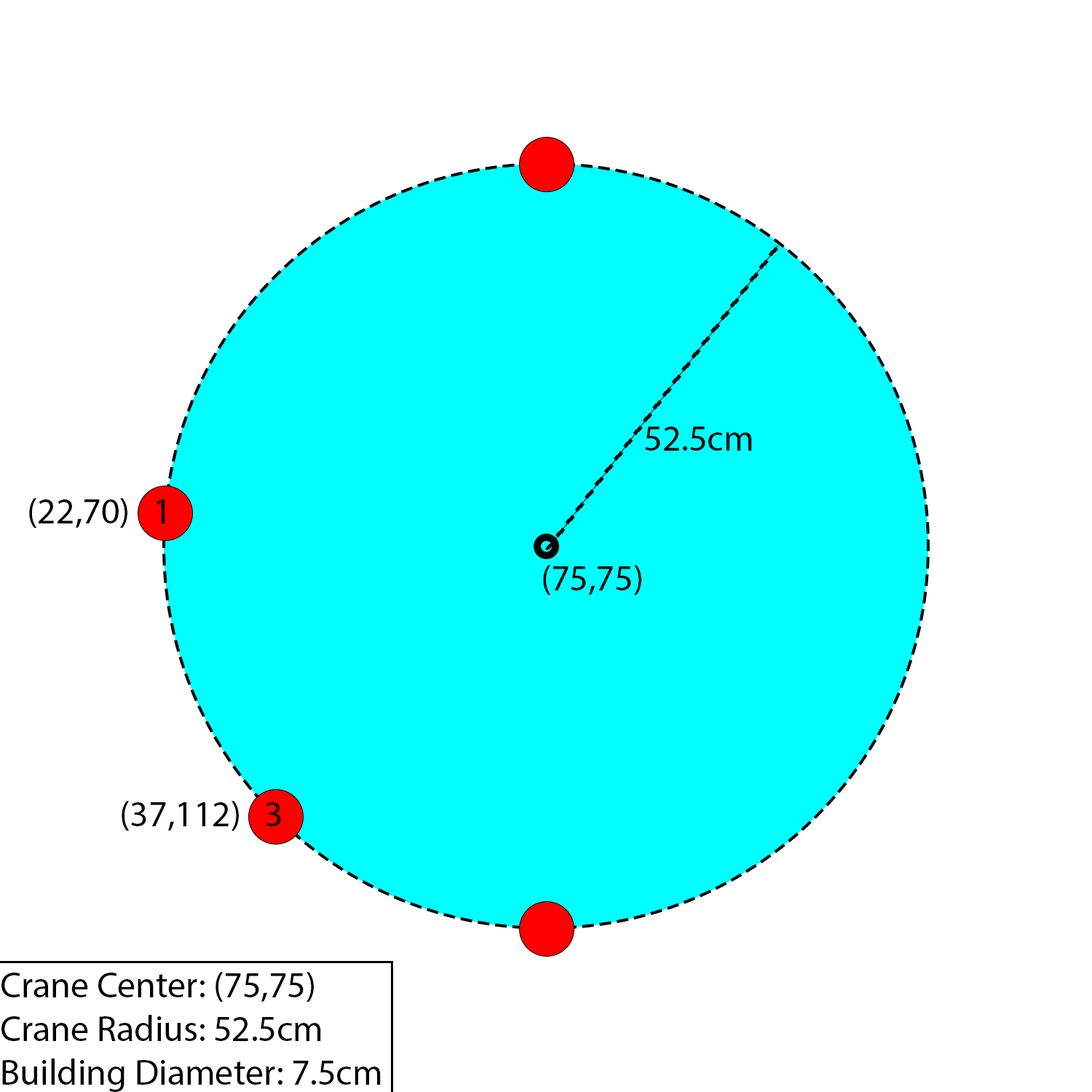
<style>
.page{position:relative;width:1092px;height:1092px;background:#ffffff}
.page>*{position:absolute;margin:0}
.t1{font:36.4px "MyriadPro-Regular";color:#000000}
</style>
<div class="page">
<p class="t1" style="left:645px;top:427px;width:107px;height:24px">52.5cm</p>
<p class="t1" style="left:29px;top:498px;width:136px;height:30px">(22,70)   1</p>
<p class="t1" style="left:543px;top:565px;width:98px;height:30px">(75,75)</p>
<p class="t1" style="left:122px;top:801px;width:159px;height:30px">(37,112)   3</p>
<p class="t1" style="left:1px;top:972px;width:380px;height:120px">Crane Center: (75,75)<br>Crane Radius: 52.5cm<br>Building Diameter: 7.5cm</p>
</div>
